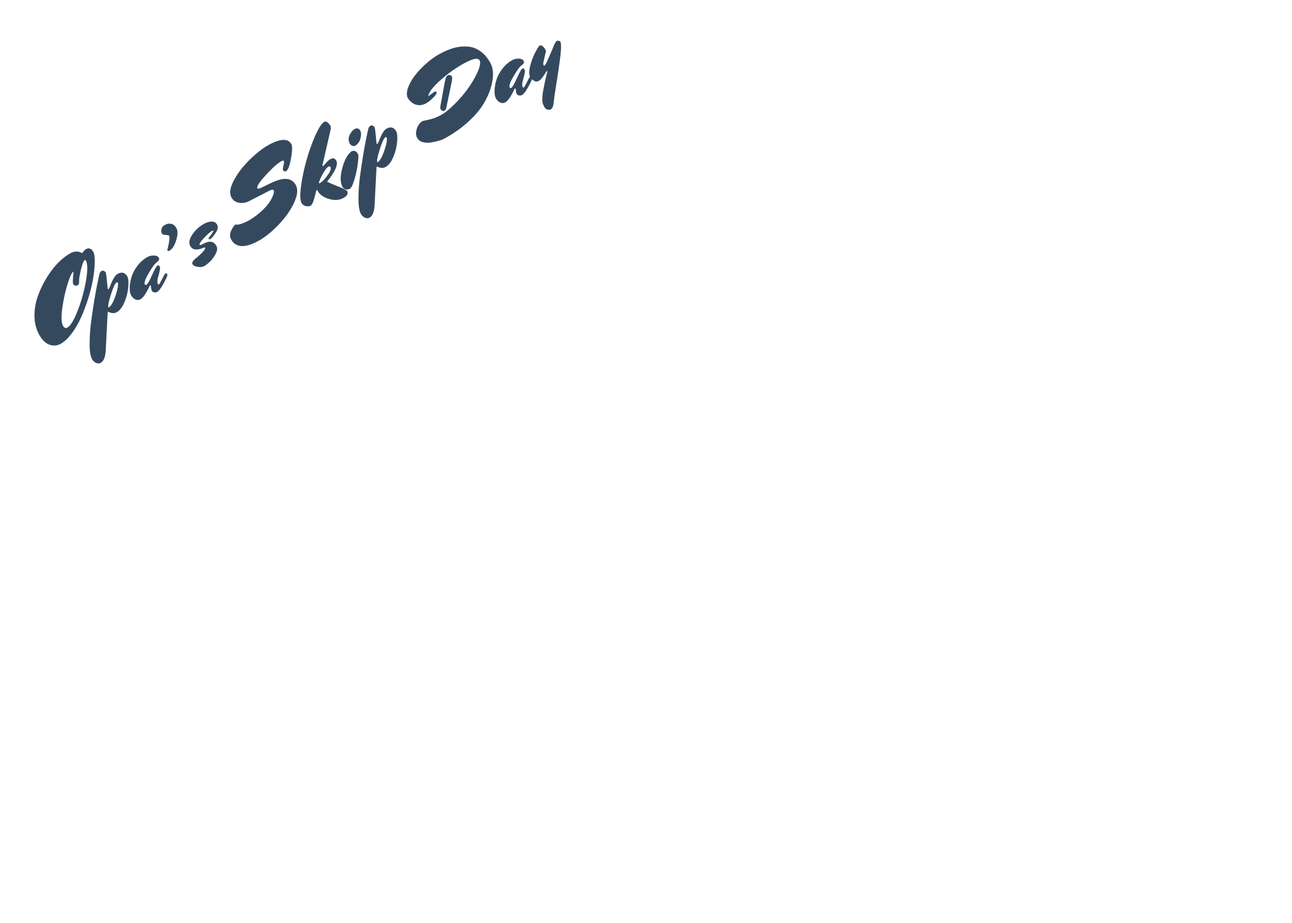
<style>
.page{position:relative;width:1292px;height:923px;background:#ffffff}
.page>*{position:absolute;margin:0}
.t1{font:102.5px "MrsSheppards-Regular";color:#34495e}
</style>
<div class="page">
<p class="t1" style="left:34px;top:41px;width:527px;height:323px;rotate:-28deg">Opa’s Skip Day</p>
</div>
